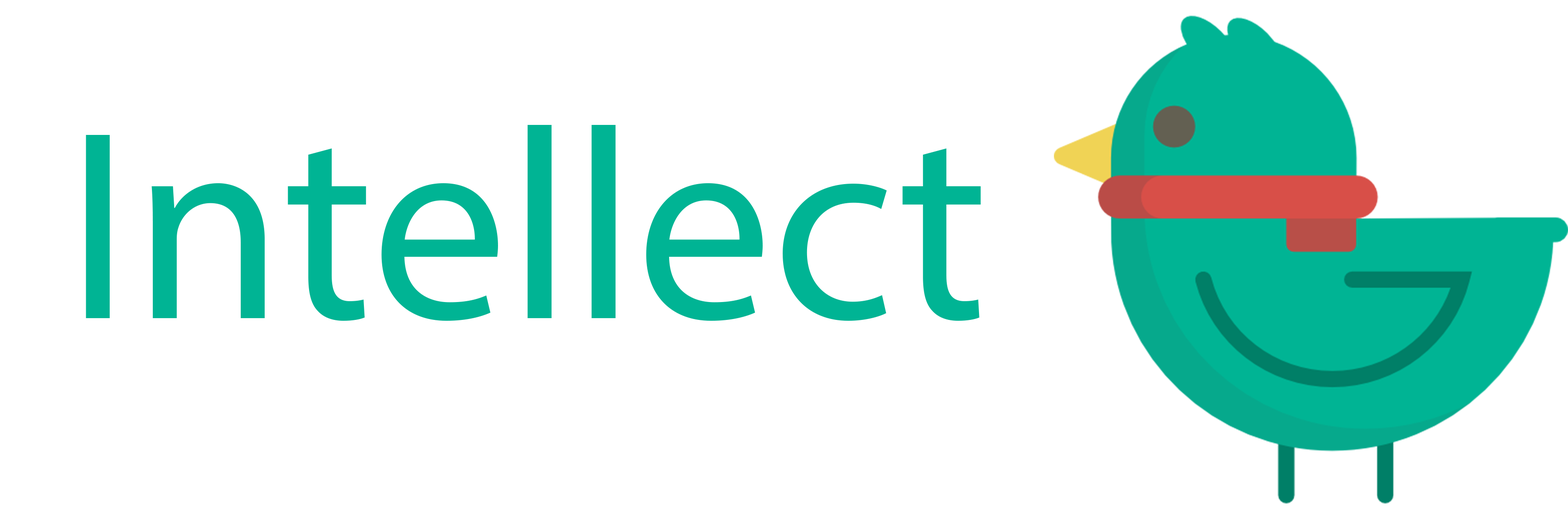
<style>
.page{position:relative;width:1568px;height:514px;background:#ffffff}
.page>*{position:absolute;margin:0}
.t1{font:272.1px "MyriadPro-Regular";color:#00b494}
</style>
<div class="page">
<p class="t1" style="left:86px;top:125px;width:895px;height:196px">Intellect</p>
</div>
